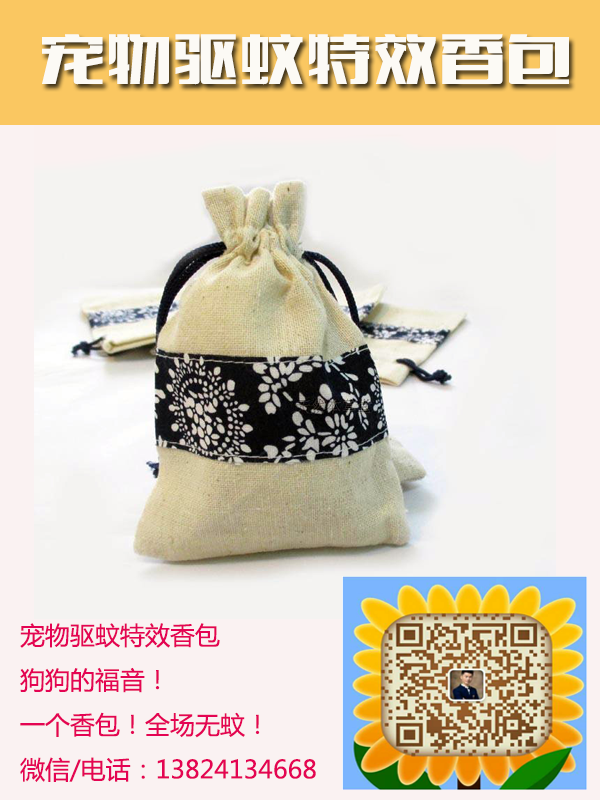
<style>
.page{position:relative;width:600px;height:800px}
.page>*{position:absolute;margin:0}
.t1{font:66.7px "FZCTHJW--GB1-0";color:#fcfaf5}
.t2{font:25px/44.8px "MicrosoftYaHei";color:#e40453}
</style>
<div class="page">
<p class="t1" style="left:42px;top:34px;width:527px;height:51px">宠物驱蚊特效香包</p>
<p class="t2" style="left:20px;top:623px;width:296px;height:159px">宠物驱蚊特效香包<br>狗狗的福音！<br>一个香包！全场无蚊！<br>微信/电话：13824134668</p>
</div>
